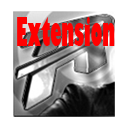
<style>
.page{position:relative;width:128px;height:128px;background:#ffffff}
.page>*{position:absolute;margin:0}
.t1{font:38px "GillSans-UltraBold";color:#ff0000;scale:0.42 1}
</style>
<div class="page">
<p class="t1" style="left:17px;top:17px;width:98px;height:29px">Extension</p>
</div>
